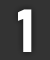
<style>
.page{position:relative;width:50px;height:60px;background:#333333}
.page>*{position:absolute;margin:0}
.t1{font:60px "Bahnschrift-Bold";color:#ffffff}
</style>
<div class="page">
<p class="t1" style="left:18px;top:9px;width:14px;height:43px">1</p>
</div>
